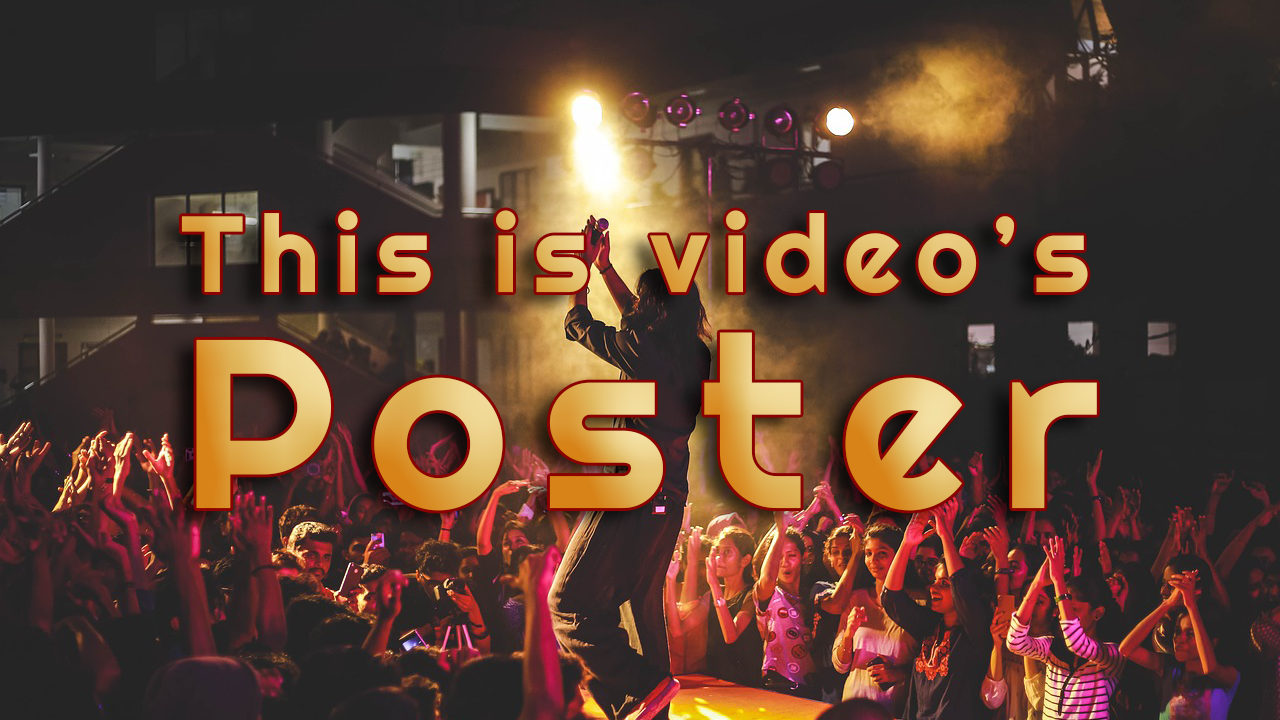
<style>
.page{position:relative;width:1280px;height:720px}
.page>*{position:absolute;margin:0}
.t1{font:108.1px/216.1px "Righteous-Regular";letter-spacing:0.14em}
.t2{font:240.1px/216.1px "Righteous-Regular";letter-spacing:0.14em}
</style>
<div class="page">
<p class="t1" style="left:181px;top:210px;width:916px;height:301px">This is video’s<br><span class="t2">Poster</span></p>
</div>
